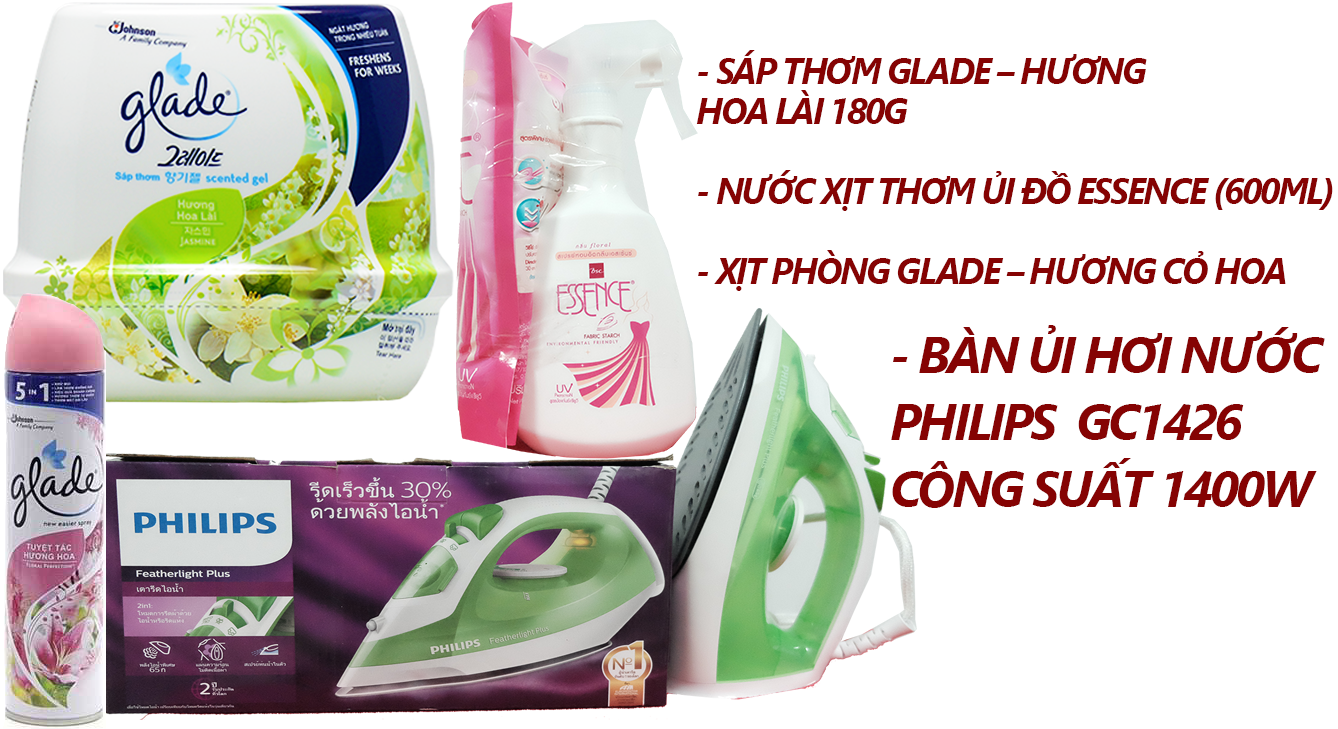
<style>
.page{position:relative;width:1338px;height:729px;background:#ffffff}
.page>*{position:absolute;margin:0}
.t1{font:36px/40px "SegoeUI-BoldItalic";letter-spacing:-0.06em;color:#850303;text-transform:uppercase}
.t2{font:50px/67px "SegoeUI-BoldItalic";letter-spacing:-0.06em;color:#850303;text-transform:uppercase}
</style>
<div class="page">
<p class="t1" style="left:696px;top:50px;width:637px;height:241px">- Sáp thơm GLADE – Hương <br>hoa lài 180g <br><br>- Nước xịt thơm ủi đồ ESSENCE (600ML)<br><br>- Xịt phòng GLADE – Hương cỏ hoa</p>
<p class="t2" style="left:891px;top:325px;width:434px;height:183px">- BÀN ỦI HƠI NƯỚC <br>PHILIPS  GC1426 <br>công suất 1400W</p>
</div>
